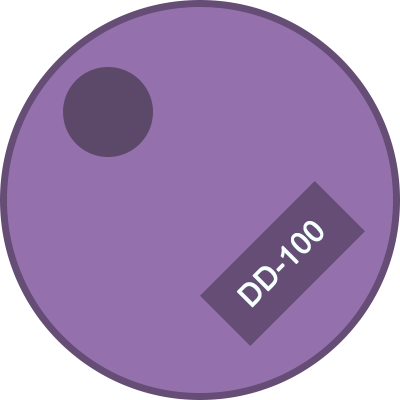
<style>
.page{position:relative;width:400px;height:400px;background:#9471ac}
.page>*{position:absolute;margin:0}
.t1{font:30px "ArialMT";color:#f5ffff;font-weight:bold}
.t2{font:14px "ArialMT";color:#f5ffff;font-weight:bold}
</style>
<div class="page">
<p class="t1" style="left:237px;top:221px;width:87px;height:87px;rotate:-45deg"><span class="t2"><br><br><br><br><br><br><br><br><br></span><br><br><br><br><br><br><br><br><br><br><br>DD-100</p>
</div>
